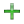
<style>
.page{position:relative;width:24px;height:24px;background:#ffffff}
.page>*{position:absolute;margin:0}
.t1{font:32px "FranklinGothic-MediumItalic"}
</style>
<div class="page">
<p class="t1" style="left:4px;top:3px;width:16px;height:17px">+</p>
</div>
